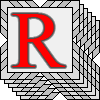
<style>
.page{position:relative;width:100px;height:100px;background:#f0f0f0}
.page>*{position:absolute;margin:0}
.t1{font:80px "TimesNewRomanPSMT";color:#ff0000}
</style>
<div class="page">
<p class="t1" style="left:12px;top:14px;width:54px;height:53px">R</p>
</div>
